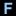
<style>
.page{position:relative;width:16px;height:16px;background:#000000}
.page>*{position:absolute;margin:0}
.t1{font:15.7px "Arial-BoldMT";color:#99ccff}
</style>
<div class="page">
<p class="t1" style="left:4px;top:2px;width:9px;height:12px">F</p>
</div>
